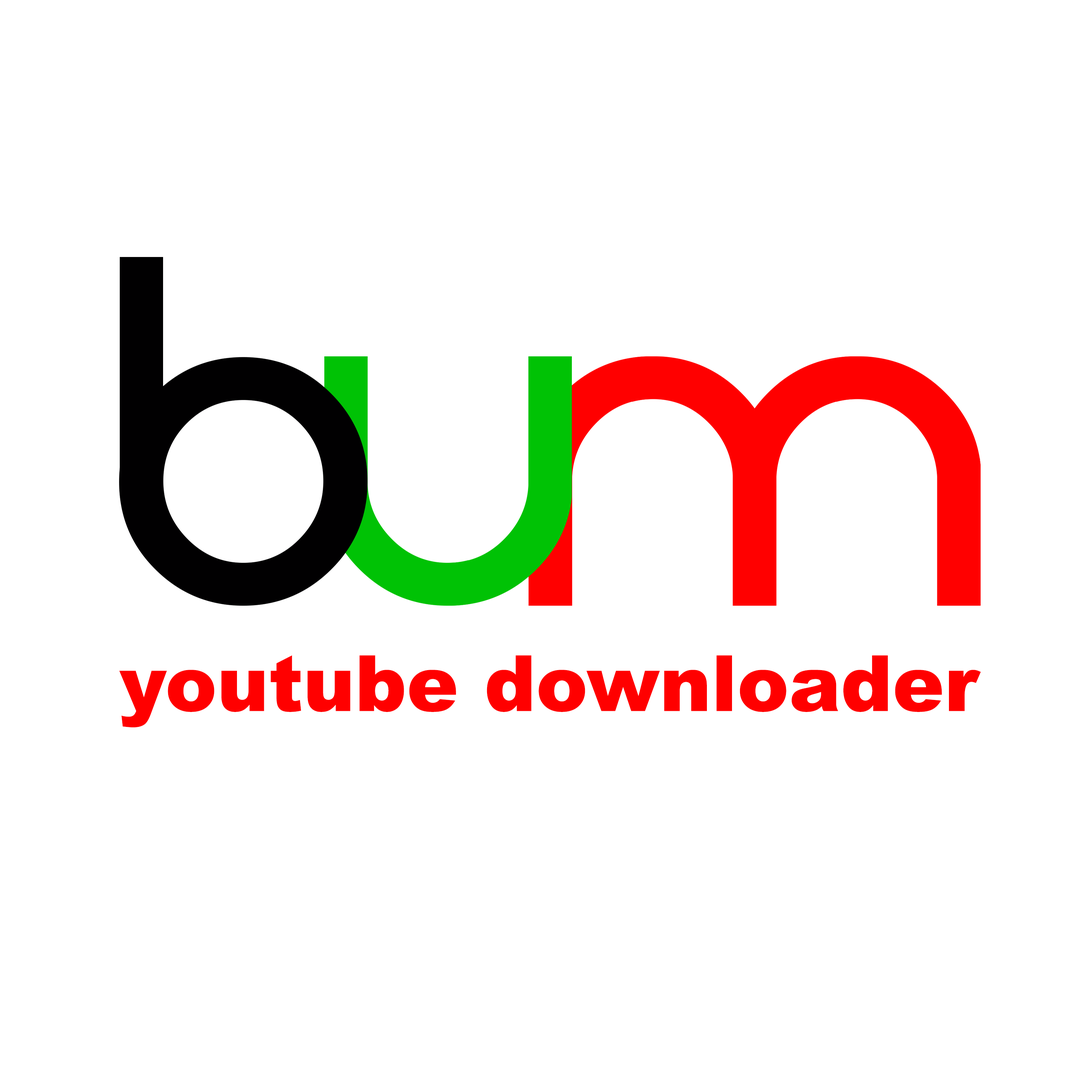
<style>
.page{position:relative;width:1092px;height:1092px;background:#ffffff}
.page>*{position:absolute;margin:0}
.t1{font:77.6px "Arial-Black";color:#ff0000}
</style>
<div class="page">
<p class="t1" style="left:119px;top:655px;width:862px;height:73px">youtube downloader</p>
</div>
